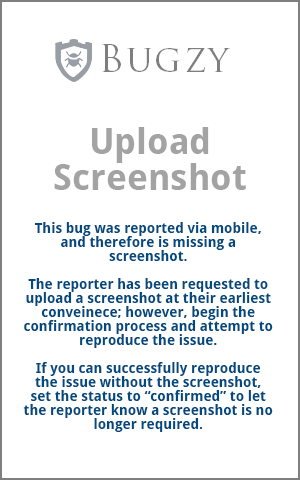
<style>
.page{position:relative;width:300px;height:480px;background:#ffffff}
.page>*{position:absolute;margin:0}
.t1{font:36px/36px "DroidSans-Bold";color:#a3a3a3}
.t2{font:14px/14px "DroidSans-Bold";color:#004a80}
</style>
<div class="page">
<p class="t1" style="left:54px;top:127px;width:192px;height:63px;text-align:center">Upload<br>Screenshot</p>
<p class="t2" style="left:23px;top:222px;width:250px;height:210px;text-align:center">This bug was reported via mobile, and therefore is missing a screenshot.<br><br>The reporter has been requested to upload a screenshot at their earliest conveinece; however, begin the confirmation process and attempt to reproduce the issue.<br><br>If you can successfully reproduce the issue without the screenshot, set the status to “confirmed” to let the reporter know a screenshot is no longer required.</p>
</div>
